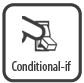
<style>
.page{position:relative;width:84px;height:83px;background:#ffffff}
.page>*{position:absolute;margin:0}
.t1{font:14px "MyriadPro-Cond";color:#3e3e3e}
</style>
<div class="page">
<p class="t1" style="left:12px;top:61px;width:59px;height:10px">Conditional-if</p>
</div>
